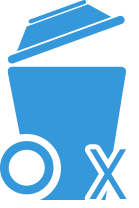
<style>
.page{position:relative;width:139px;height:208px;background:#3498db}
.page>*{position:absolute;margin:0}
.t1{font:68px "Pasajero";color:#3498db}
</style>
<div class="page">
<p class="t1" style="left:89px;top:149px;width:38px;height:50px">x</p>
</div>
